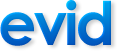
<style>
.page{position:relative;width:117px;height:51px;background:#ffffff}
.page>*{position:absolute;margin:0}
.t1{font:60px "CenturyGothic-Bold";letter-spacing:-0.05em}
</style>
<div class="page">
<p class="t1" style="left:0px;top:0px;width:111px;height:46px">evid</p>
</div>
